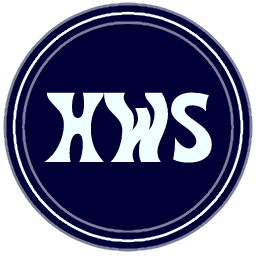
<style>
.page{position:relative;width:256px;height:256px;background:#000036}
.page>*{position:absolute;margin:0}
.t1{font:86.5px "HeavyHeap";color:#ffffff}
</style>
<div class="page">
<p class="t1" style="left:44px;top:92px;width:168px;height:71px">HWS</p>
</div>
